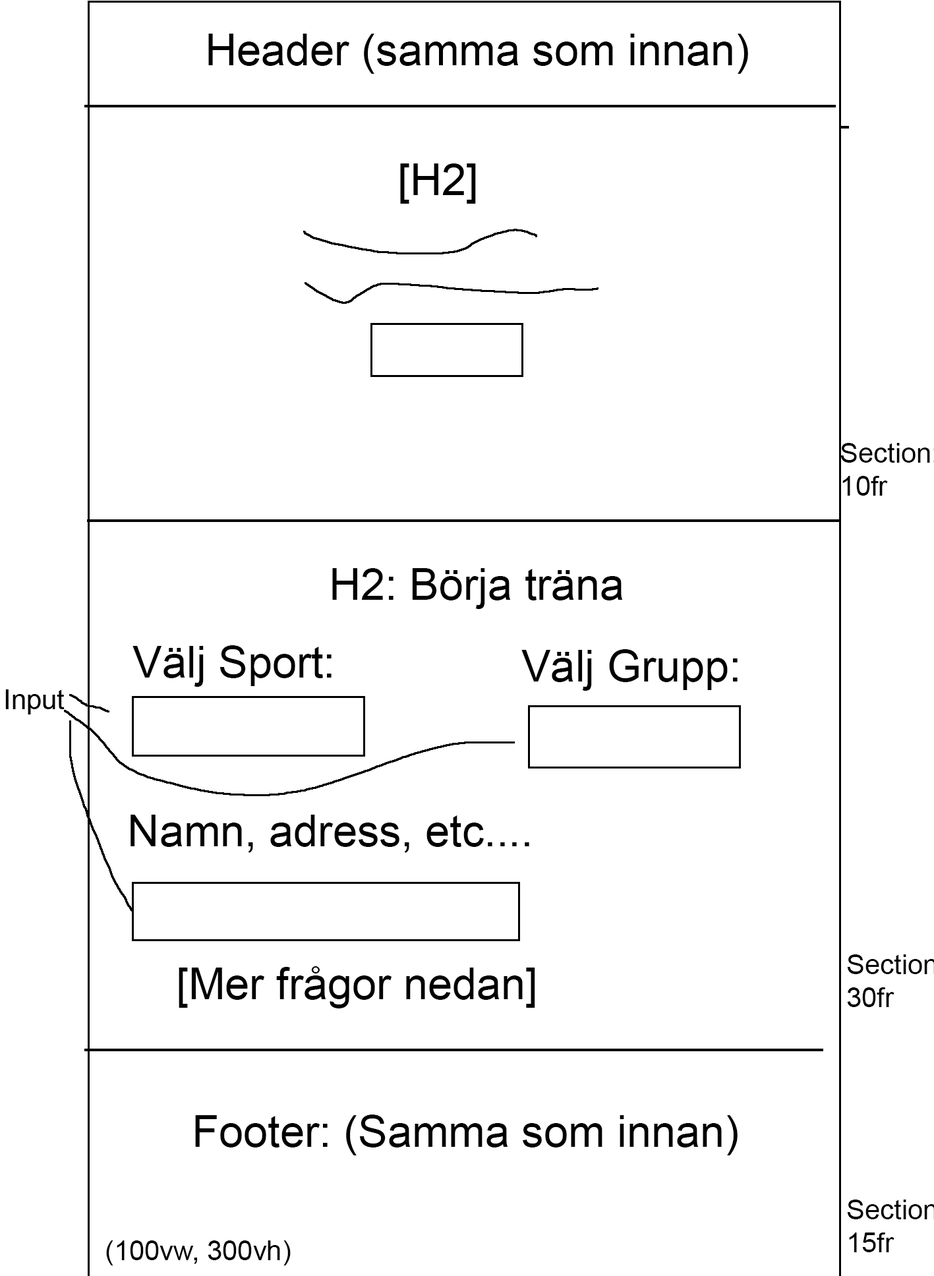
<style>
.page{position:relative;width:934px;height:1276px;background:#ffffff}
.page>*{position:absolute;margin:0}
.t1{font:44px "ArialMT";color:#000000}
.t2{font:27.5px "ArialMT";color:#000000}
</style>
<div class="page">
<p class="t1" style="left:208px;top:34px;width:540px;height:40px">Header (samma som innan)</p>
<p class="t1" style="left:332px;top:568px;width:291px;height:41px">H2: Börja träna</p>
<p class="t1" style="left:133px;top:645px;width:199px;height:42px">Välj Sport:</p>
<p class="t1" style="left:522px;top:649px;width:216px;height:42px">Välj Grupp:</p>
<p class="t1" style="left:131px;top:815px;width:398px;height:38px">Namn, adress, etc....</p>
<p class="t1" style="left:179px;top:967px;width:356px;height:42px">[Mer frågor nedan]</p>
<p class="t1" style="left:195px;top:1115px;width:543px;height:41px">Footer: (Samma som innan)</p>
<p class="t2" style="left:106px;top:1241px;width:185px;height:25px">(100vw, 300vh)</p>
</div>
